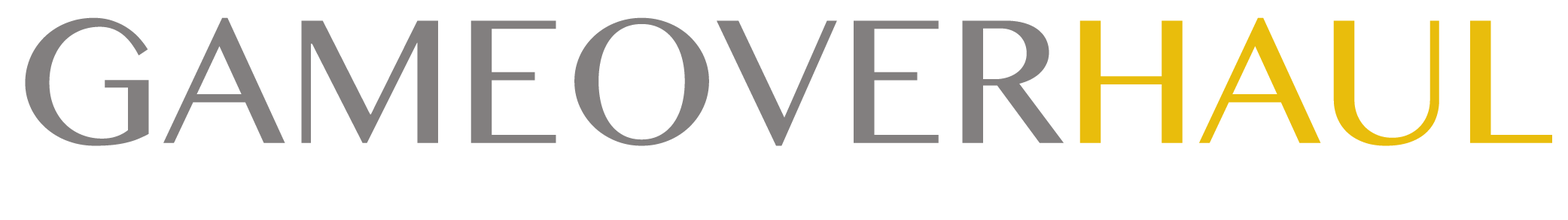
<style>
.page{position:relative;width:1568px;height:220px;background:#ffffff}
.page>*{position:absolute;margin:0}
.t1{font:188.4px "MalayalamMN";color:#827f7f}
.t2{font:188.4px "MalayalamMN";color:#e9bd0c}
</style>
<div class="page">
<p class="t1" style="left:25px;top:17px;width:1527px;height:129px">GAMEOVER<span class="t2">HAUL</span></p>
</div>
